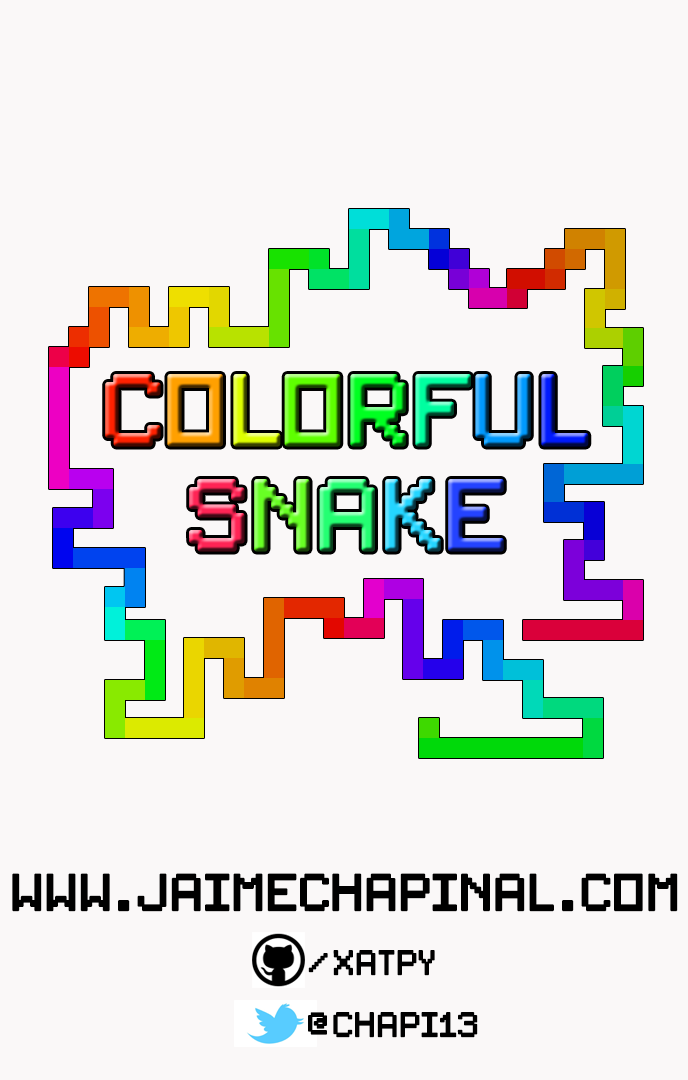
<style>
.page{position:relative;width:688px;height:1080px;background:#faf8f8}
.page>*{position:absolute;margin:0}
.t1{font:48px "PixelSplitter-Bold";color:#000000}
.t2{font:32px "PixelSplitter-Bold";color:#000000}
</style>
<div class="page">
<p class="t1" style="left:12px;top:873px;width:666px;height:39px">www.jaimechapinal.com</p>
<p class="t2" style="left:308px;top:950px;width:127px;height:26px">xatpy/</p>
<p class="t2" style="left:308px;top:1012px;width:170px;height:26px">chapi13@</p>
</div>
